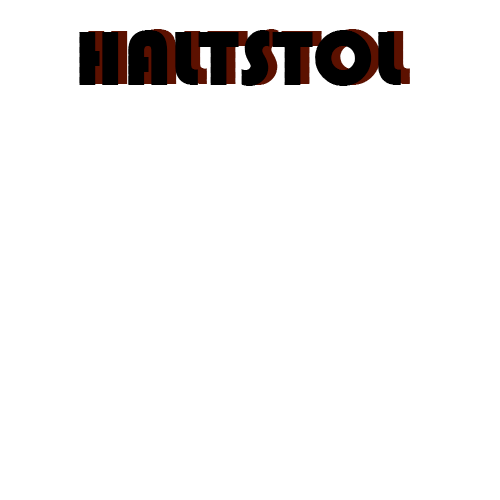
<style>
.page{position:relative;width:500px;height:500px;background:#ffffff}
.page>*{position:absolute;margin:0}
.t1{font:80px "Bauhaus93";color:#000000}
.t2{font:80px "Bauhaus93"}
</style>
<div class="page">
<p class="t1" style="left:79px;top:30px;width:322px;height:56px">HALTSTOL</p>
<p class="t2" style="left:88px;top:29px;width:322px;height:56px">HALTSTOL</p>
</div>
